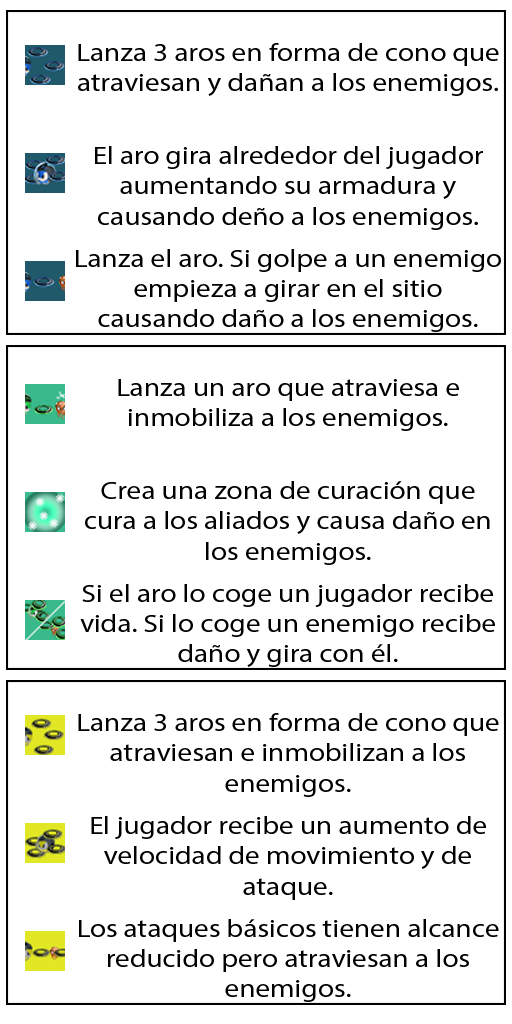
<style>
.page{position:relative;width:512px;height:1024px;background:#ffffff}
.page>*{position:absolute;margin:0}
.t1{font:25.4px "MyriadPro-Regular";color:#000000;scale:1.15 1}
</style>
<div class="page">
<p class="t1" style="left:78px;top:43px;width:421px;height:53px;text-align:center">Lanza 3 aros en forma de cono que atraviesan y dañan a los enemigos.</p>
<p class="t1" style="left:95px;top:146px;width:388px;height:84px;text-align:center">El aro gira alrededor del jugador aumentando su armadura y causando deño a los enemigos.</p>
<p class="t1" style="left:76px;top:249px;width:425px;height:83px;text-align:center">Lanza el aro. Si golpe a un enemigo empieza a girar en el sitio causando daño a los enemigos.</p>
<p class="t1" style="left:118px;top:379px;width:341px;height:52px;text-align:center">Lanza un aro que atraviesa e inmobiliza a los enemigos.</p>
<p class="t1" style="left:85px;top:481px;width:405px;height:84px;text-align:center">Crea una zona de curación que cura a los aliados y causa daño en los enemigos.</p>
<p class="t1" style="left:80px;top:584px;width:415px;height:83px;text-align:center">Si el aro lo coge un jugador recibe vida. Si lo coge un enemigo recibe daño y gira con él.</p>
<p class="t1" style="left:78px;top:713px;width:421px;height:84px;text-align:center">Lanza 3 aros en forma de cono que atraviesan e inmobilizan a los enemigos.</p>
<p class="t1" style="left:91px;top:816px;width:395px;height:84px;text-align:center">El jugador recibe un aumento de velocidad de movimiento y de ataque.</p>
<p class="t1" style="left:79px;top:919px;width:420px;height:83px;text-align:center">Los ataques básicos tienen alcance reducido pero atraviesan a los enemigos.</p>
</div>
